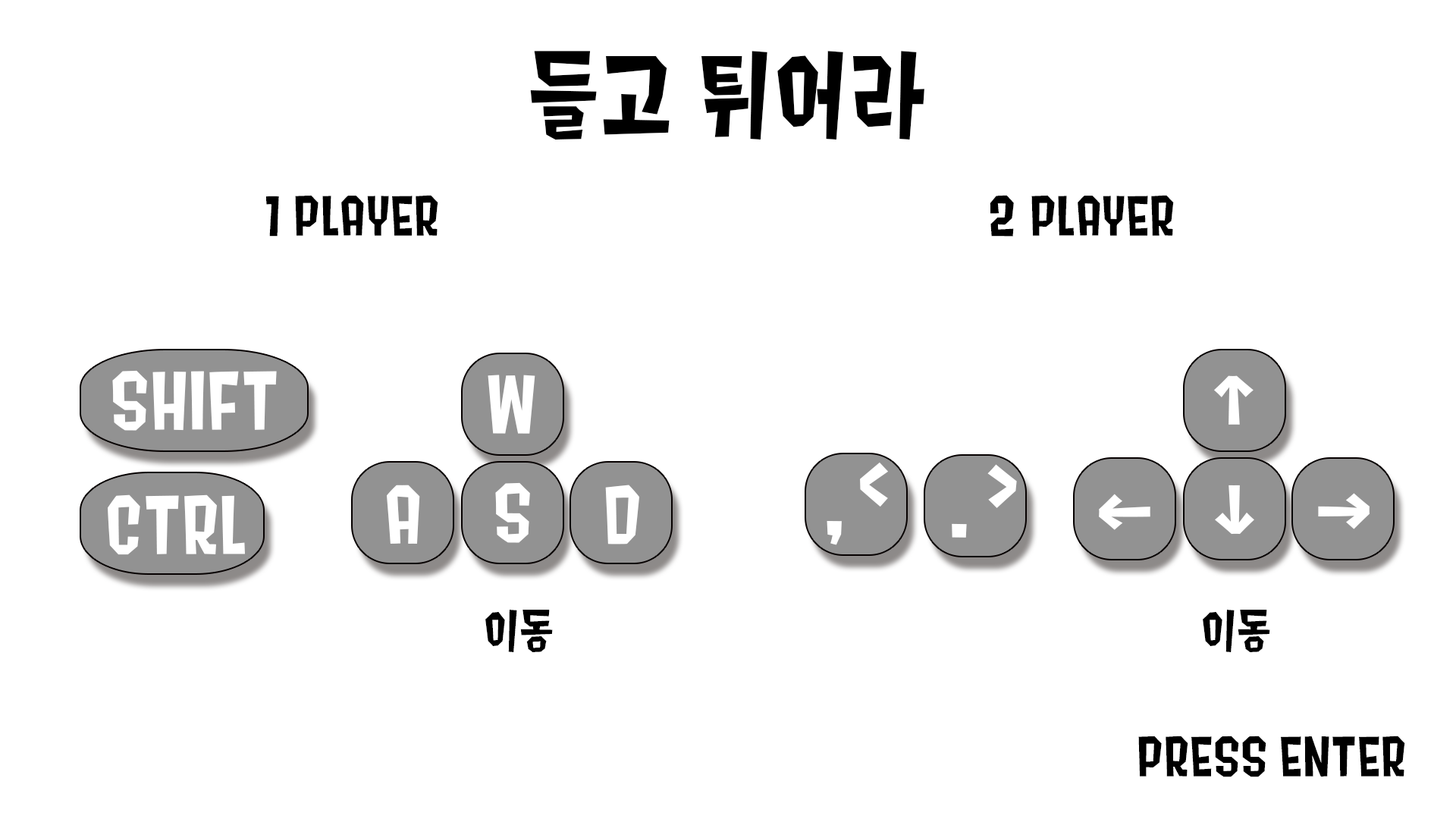
<style>
.page{position:relative;width:1456px;height:819px;background:#ffffff}
.page>*{position:absolute;margin:0}
.t1{font:113.7px "Splat2K";letter-spacing:0.01em;color:#000000}
.t2{font:54.6px "Splat2K";letter-spacing:0.01em;color:#000000}
.t3{font:80.1px "Splat2K";letter-spacing:0.01em;color:#ffffff}
</style>
<div class="page">
<p class="t1" style="left:530px;top:51px;width:394px;height:89px">들고 튀어라</p>
<p class="t2" style="left:266px;top:195px;width:172px;height:42px">1 PLAYER</p>
<p class="t2" style="left:990px;top:195px;width:184px;height:42px">2 PLAYER</p>
<p class="t3" style="left:112px;top:370px;width:165px;height:61px">SHIFT</p>
<p class="t3" style="left:488px;top:375px;width:47px;height:59px">W</p>
<p class="t3" style="left:1214px;top:375px;width:40px;height:50px">↑</p>
<p class="t3" style="left:860px;top:462px;width:29px;height:45px">&lt;</p>
<p class="t3" style="left:987px;top:464px;width:30px;height:44px">&gt;</p>
<p class="t3" style="left:387px;top:485px;width:33px;height:59px">A</p>
<p class="t3" style="left:495px;top:482px;width:35px;height:61px">S</p>
<p class="t3" style="left:605px;top:485px;width:34px;height:59px">D</p>
<p class="t3" style="left:1215px;top:485px;width:39px;height:50px">↓</p>
<p class="t3" style="left:108px;top:494px;width:137px;height:61px">CTRL</p>
<p class="t3" style="left:1099px;top:494px;width:51px;height:36px">←</p>
<p class="t3" style="left:1318px;top:493px;width:52px;height:36px">→</p>
<p class="t3" style="left:827px;top:521px;width:15px;height:24px">,</p>
<p class="t3" style="left:952px;top:523px;width:15px;height:15px">.</p>
<p class="t2" style="left:485px;top:610px;width:68px;height:42px">이동</p>
<p class="t2" style="left:1203px;top:610px;width:67px;height:42px">이동</p>
<p class="t2" style="left:1138px;top:736px;width:267px;height:41px">PRESS ENTER</p>
</div>
